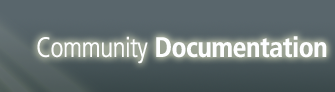
<style>
.page{position:relative;width:335px;height:92px;background:#59666c}
.page>*{position:absolute;margin:0}
.t1{font:28px "Frutiger-BoldCn";letter-spacing:-0.02em;color:#fdfeff}
.t2{font:28px "Frutiger-LightCn";letter-spacing:-0.02em;color:#fdfeff}
</style>
<div class="page">
<p class="t1" style="left:37px;top:36px;width:290px;height:28px"><span class="t2">Community </span>Documentation</p>
</div>
